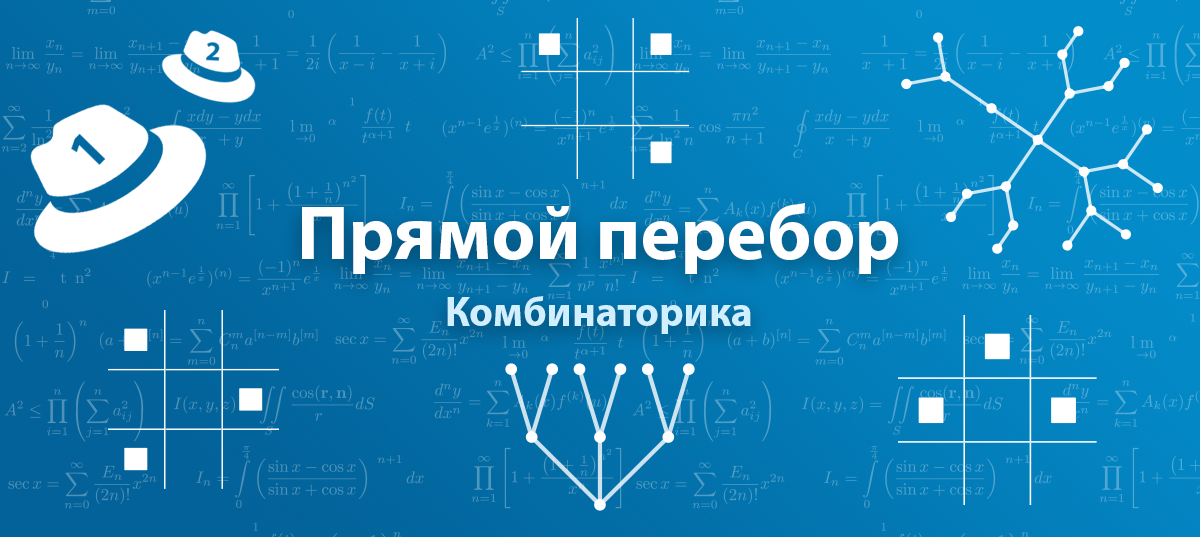
<style>
.page{position:relative;width:1200px;height:537px}
.page>*{position:absolute;margin:0}
.t1{font:76.9px "MyriadPro-Bold";color:#ffffff}
.t2{font:41.6px "MyriadPro-Bold";color:#d0efff}
</style>
<div class="page">
<p class="t1" style="left:302px;top:203px;width:596px;height:71px">Прямой перебор</p>
<p class="t2" style="left:447px;top:296px;width:304px;height:38px">Комбинаторика</p>
</div>
